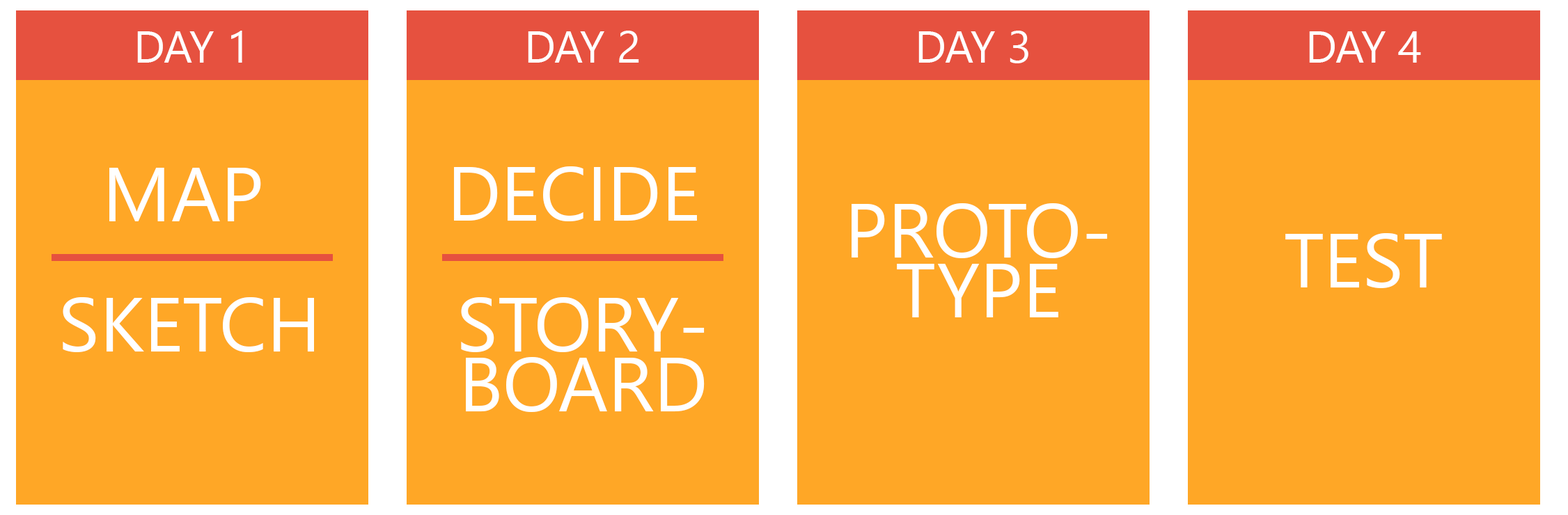
<style>
.page{position:relative;width:1568px;height:515px;background:#ffa726}
.page>*{position:absolute;margin:0}
.t1{font:44.7px "SegoeUI";color:#ffffff;text-transform:uppercase}
.t2{font:76.6px "SegoeUI";color:#ffffff;text-transform:uppercase}
.t3{font:76.6px/60px "SegoeUI";color:#ffffff;text-transform:uppercase}
</style>
<div class="page">
<p class="t1" style="left:137px;top:31px;width:105px;height:32px">Day 1</p>
<p class="t1" style="left:528px;top:31px;width:111px;height:32px">Day 2</p>
<p class="t1" style="left:918px;top:31px;width:110px;height:32px">Day 3</p>
<p class="t1" style="left:1309px;top:31px;width:112px;height:32px">Day 4</p>
<p class="t2" style="left:109px;top:168px;width:152px;height:53px">Map</p>
<p class="t2" style="left:454px;top:166px;width:243px;height:55px">Decide</p>
<p class="t3" style="left:852px;top:203px;width:256px;height:114px;text-align:center">proto-<br>type</p>
<p class="t2" style="left:1285px;top:233px;width:157px;height:55px">test</p>
<p class="t2" style="left:63px;top:297px;width:251px;height:55px">Sketch</p>
<p class="t3" style="left:461px;top:297px;width:244px;height:115px;text-align:center">story-<br>board</p>
</div>
